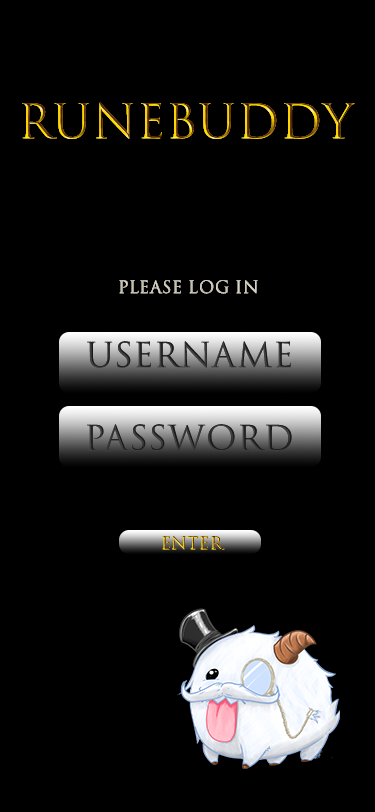
<style>
.page{position:relative;width:375px;height:812px;background:#000000}
.page>*{position:absolute;margin:0}
.t1{font:45.8px "TrajanColor-Concept";font-weight:bold}
.t2{font:16.7px "TrajanColor-Concept";color:#c5c1b1;font-weight:bold}
.t3{font:33.3px "TrajanColor-Concept";color:#303030;font-weight:bold}
.t4{font:33.3px "TrajanColor-Concept";color:#2f2f2f;font-weight:bold}
.t5{font:16.7px "TrajanColor-Concept";font-weight:bold}
</style>
<div class="page">
<p class="t1" style="left:22px;top:102px;width:333px;height:37px">Runebuddy</p>
<p class="t2" style="left:119px;top:280px;width:139px;height:14px">PLEASE LOG IN</p>
<p class="t3" style="left:87px;top:341px;width:204px;height:27px">USERNAME</p>
<p class="t4" style="left:87px;top:424px;width:205px;height:27px">PASSWORD</p>
<p class="t5" style="left:162px;top:536px;width:63px;height:14px">Enter</p>
</div>
